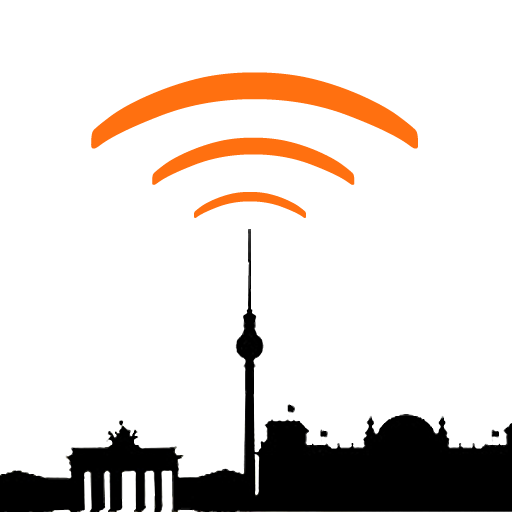
<style>
.page{position:relative;width:512px;height:512px;background:#ffffff}
.page>*{position:absolute;margin:0}
.t1{font:349.2px "BellMTBold";letter-spacing:-0.12em;color:#ff7010;scale:0.88 1}
.t2{font:216.2px "BellMTBold";letter-spacing:-0.12em;color:#ff7010;scale:0.88 1}
.t3{font:119.7px "BellMTBold";letter-spacing:-0.12em;color:#ff7010;scale:0.88 1}
</style>
<div class="page">
<p class="t1" style="left:91px;top:72px;width:327px;height:77px;rotate:-90deg">)</p>
<p class="t2" style="left:152px;top:137px;width:203px;height:48px;rotate:-90deg">)</p>
<p class="t3" style="left:194px;top:192px;width:112px;height:26px;rotate:-90deg">)</p>
</div>
